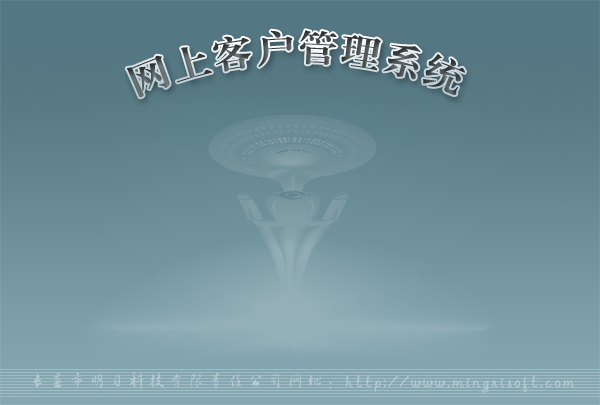
<style>
.page{position:relative;width:600px;height:405px}
.page>*{position:absolute;margin:0}
.t1{font:36px "FZXBSJW--GB1-0";letter-spacing:0.1em}
.t2{font:18px "FZHCJW--GB1-0";letter-spacing:0.1em;color:#b6cbd2}
</style>
<div class="page">
<p class="t1" style="left:126px;top:30px;width:339px;height:68px">网上客户管理系统</p>
<p class="t2" style="left:33px;top:372px;width:542px;height:21px">长春市明日科技有限责任公司网址：http://www.mingrisoft.com</p>
</div>
